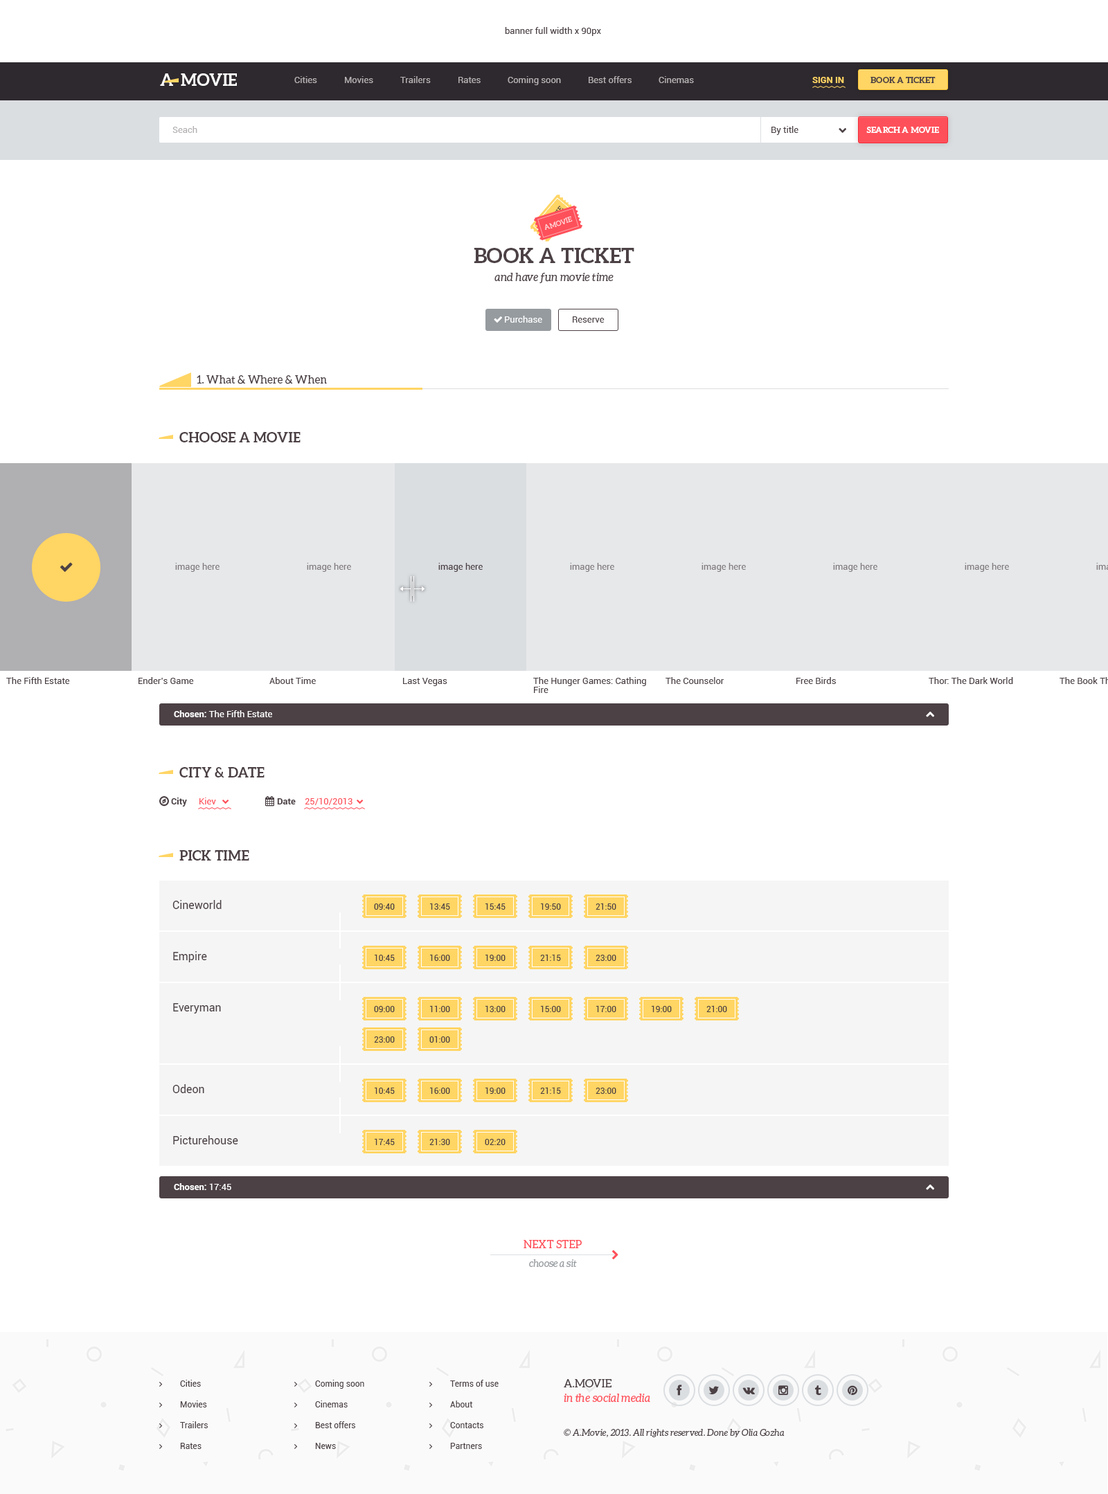
<style>
.page{position:relative;width:1108px;height:1494px;background:#ffffff}
.page>*{position:absolute;margin:0}
.t1{font:9px "Roboto-Regular";color:#4c4145}
.t2{font:16.6px "Aleo-Bold";color:#ffffff;text-transform:uppercase}
.t3{font:9px "Roboto-Regular";color:#b4b1b2}
.t4{font:9px "Roboto-Bold";color:#ffd564;text-transform:uppercase}
.t5{font:8.3px "Aleo-Bold";color:#4c4145;text-transform:uppercase}
.t6{font:8.3px "Aleo-Bold";color:#ffffff;text-transform:uppercase}
.t7{font:6.9px "Aleo-Regular";color:#fe505a;text-transform:uppercase}
.t8{font:6.9px "Aleo-Regular";color:#ffd5d7;text-transform:uppercase}
.t9{font:11.1px/18px "Aleo-Italic";color:#4c4145}
.t10{font:20.8px/18px "Aleo-Bold";color:#4c4145;text-transform:uppercase}
.t11{font:9px "Roboto-Regular";color:#ffffff}
.t12{font:11.1px "Aleo-Regular";color:#4c4145}
.t13{font:13.8px "Aleo-Bold";color:#4c4145;text-transform:uppercase}
.t14{font:9px "Roboto-Regular";color:#827a7d}
.t15{font:9px/9px "Roboto-Regular";color:#4c4145}
.t16{font:9px "Roboto-Bold";color:#ffffff}
.t17{font:9px "Roboto-Bold";color:#4c4145}
.t18{font:9px "Roboto-Regular";color:#fe505a}
.t19{font:11.1px "Roboto-Regular";color:#4c4145}
.t20{font:8.3px "Roboto-Regular";color:#4c4145}
.t21{font:11.1px "Aleo-Regular";color:#fe505a;text-transform:uppercase}
.t22{font:9.7px "Aleo-Italic";color:#969b9f}
.t23{font:11.1px/14.5px "Aleo-Italic";color:#fe505a}
.t24{font:11.1px/14.5px "Aleo-Regular";color:#4c4145;text-transform:uppercase}
.t25{font:9px "Aleo-Italic";color:#4c4145}
</style>
<div class="page">
<p class="t1" style="left:505px;top:27px;width:96px;height:9px">banner full width x 90px</p>
<p class="t2" style="left:160px;top:73px;width:13px;height:13px">A</p>
<p class="t2" style="left:181px;top:73px;width:56px;height:13px">movie</p>
<p class="t3" style="left:294px;top:76px;width:23px;height:7px">Cities</p>
<p class="t3" style="left:345px;top:76px;width:28px;height:7px">Movies</p>
<p class="t3" style="left:400px;top:76px;width:31px;height:7px">Trailers</p>
<p class="t3" style="left:458px;top:77px;width:22px;height:6px">Rates</p>
<p class="t3" style="left:507px;top:76px;width:54px;height:9px">Coming soon</p>
<p class="t3" style="left:588px;top:76px;width:43px;height:7px">Best offers</p>
<p class="t3" style="left:658px;top:76px;width:36px;height:7px">Cinemas</p>
<p class="t4" style="left:812px;top:77px;width:32px;height:6px">Sign in</p>
<p class="t5" style="left:870px;top:77px;width:65px;height:6px">Book a ticket</p>
<p class="t3" style="left:172px;top:126px;width:25px;height:7px">Seach</p>
<p class="t1" style="left:771px;top:126px;width:27px;height:9px">By title</p>
<p class="t6" style="left:866px;top:127px;width:73px;height:6px">search a movie</p>
<p class="t7" style="left:542px;top:206px;width:22px;height:25px;rotate:-50deg">amovie</p>
<p class="t8" style="left:545px;top:216px;width:28px;height:14px;rotate:-17deg">amovie</p>
<p class="t9" style="left:474px;top:248px;width:160px;height:35px;text-align:center"><span class="t10">Book a ticket<br></span>and have fun movie time</p>
<p class="t11" style="left:505px;top:316px;width:37px;height:7px">Purchase</p>
<p class="t1" style="left:573px;top:316px;width:31px;height:7px">Reserve</p>
<p class="t12" style="left:197px;top:375px;width:130px;height:9px">1. What &amp; Where &amp; When</p>
<p class="t13" style="left:179px;top:432px;width:121px;height:10px">Choose a movie</p>
<p class="t14" style="left:175px;top:563px;width:44px;height:9px">image here</p>
<p class="t14" style="left:307px;top:563px;width:44px;height:9px">image here</p>
<p class="t1" style="left:438px;top:563px;width:45px;height:9px">image here</p>
<p class="t14" style="left:570px;top:563px;width:44px;height:9px">image here</p>
<p class="t14" style="left:701px;top:563px;width:45px;height:9px">image here</p>
<p class="t14" style="left:833px;top:563px;width:44px;height:9px">image here</p>
<p class="t14" style="left:964px;top:563px;width:45px;height:9px">image here</p>
<p class="t1" style="left:6px;top:677px;width:64px;height:7px">The Fifth Estate</p>
<p class="t1" style="left:138px;top:677px;width:56px;height:7px">Ender’s Game</p>
<p class="t1" style="left:269px;top:677px;width:47px;height:7px">About Time</p>
<p class="t1" style="left:403px;top:678px;width:44px;height:8px">Last Vegas</p>
<p class="t15" style="left:533px;top:677px;width:113px;height:16px">The Hunger Games: Cathing <br>Fire</p>
<p class="t1" style="left:665px;top:677px;width:59px;height:7px">The Counselor</p>
<p class="t1" style="left:796px;top:677px;width:40px;height:7px">Free Birds</p>
<p class="t1" style="left:928px;top:677px;width:85px;height:7px">Thor: The Dark World</p>
<p class="t11" style="left:174px;top:710px;width:98px;height:7px"><span class="t16">Chosen: </span>The Fifth Estate</p>
<p class="t13" style="left:179px;top:767px;width:85px;height:10px">City &amp; Date</p>
<p class="t17" style="left:171px;top:798px;width:16px;height:9px">City</p>
<p class="t18" style="left:199px;top:798px;width:17px;height:6px">Kiev</p>
<p class="t18" style="left:305px;top:798px;width:47px;height:7px">25/10/2013</p>
<p class="t17" style="left:277px;top:798px;width:19px;height:6px">Date</p>
<p class="t13" style="left:179px;top:850px;width:70px;height:11px">Pick time</p>
<p class="t19" style="left:172px;top:900px;width:50px;height:9px">Cineworld</p>
<p class="t20" style="left:374px;top:903px;width:21px;height:7px">09:40</p>
<p class="t20" style="left:430px;top:903px;width:20px;height:7px">13:45</p>
<p class="t20" style="left:485px;top:903px;width:20px;height:7px">15:45</p>
<p class="t20" style="left:541px;top:903px;width:20px;height:7px">19:50</p>
<p class="t20" style="left:595px;top:903px;width:21px;height:7px">21:50</p>
<p class="t19" style="left:173px;top:951px;width:34px;height:11px">Empire</p>
<p class="t20" style="left:375px;top:954px;width:20px;height:7px">10:45</p>
<p class="t20" style="left:430px;top:954px;width:20px;height:7px">16:00</p>
<p class="t20" style="left:485px;top:954px;width:20px;height:7px">19:00</p>
<p class="t20" style="left:540px;top:954px;width:21px;height:7px">21:15</p>
<p class="t20" style="left:595px;top:955px;width:21px;height:6px">23:00</p>
<p class="t19" style="left:173px;top:1003px;width:48px;height:11px">Everyman</p>
<p class="t20" style="left:374px;top:1006px;width:21px;height:6px">09:00</p>
<p class="t20" style="left:430px;top:1005px;width:20px;height:7px">11:00</p>
<p class="t20" style="left:485px;top:1005px;width:20px;height:7px">13:00</p>
<p class="t20" style="left:541px;top:1005px;width:20px;height:7px">15:00</p>
<p class="t20" style="left:596px;top:1005px;width:20px;height:7px">17:00</p>
<p class="t20" style="left:651px;top:1005px;width:21px;height:7px">19:00</p>
<p class="t20" style="left:706px;top:1005px;width:21px;height:7px">21:00</p>
<p class="t20" style="left:374px;top:1036px;width:21px;height:7px">23:00</p>
<p class="t20" style="left:429px;top:1036px;width:21px;height:7px">01:00</p>
<p class="t19" style="left:172px;top:1084px;width:32px;height:9px">Odeon</p>
<p class="t20" style="left:375px;top:1087px;width:20px;height:7px">10:45</p>
<p class="t20" style="left:430px;top:1087px;width:20px;height:7px">16:00</p>
<p class="t20" style="left:485px;top:1087px;width:20px;height:7px">19:00</p>
<p class="t20" style="left:540px;top:1087px;width:21px;height:7px">21:15</p>
<p class="t20" style="left:595px;top:1088px;width:21px;height:6px">23:00</p>
<p class="t19" style="left:173px;top:1135px;width:65px;height:9px">Picturehouse</p>
<p class="t20" style="left:375px;top:1138px;width:20px;height:7px">17:45</p>
<p class="t20" style="left:429px;top:1138px;width:21px;height:7px">21:30</p>
<p class="t20" style="left:485px;top:1139px;width:20px;height:6px">02:20</p>
<p class="t16" style="left:174px;top:1183px;width:57px;height:7px">Chosen: <span class="t11">17:45</span></p>
<p class="t21" style="left:523px;top:1240px;width:59px;height:8px">next step</p>
<p class="t22" style="left:529px;top:1259px;width:48px;height:9px">choose a sit</p>
<p class="t20" style="left:180px;top:1380px;width:21px;height:7px">Cities</p>
<p class="t20" style="left:315px;top:1380px;width:49px;height:9px">Coming soon</p>
<p class="t20" style="left:450px;top:1380px;width:48px;height:7px">Terms of use</p>
<p class="t23" style="left:564px;top:1379px;width:86px;height:24px"><span class="t24">A.Movie <br></span>in the social media</p>
<p class="t20" style="left:180px;top:1401px;width:27px;height:6px">Movies</p>
<p class="t20" style="left:315px;top:1401px;width:33px;height:6px">Cinemas</p>
<p class="t20" style="left:450px;top:1401px;width:23px;height:6px">About</p>
<p class="t20" style="left:180px;top:1421px;width:28px;height:7px">Trailers</p>
<p class="t20" style="left:315px;top:1421px;width:40px;height:7px">Best offers</p>
<p class="t20" style="left:450px;top:1422px;width:33px;height:6px">Contacts</p>
<p class="t25" style="left:564px;top:1429px;width:220px;height:8px">© A.Movie, 2013. All rights reserved. Done by Olia Gozha</p>
<p class="t20" style="left:180px;top:1443px;width:21px;height:6px">Rates</p>
<p class="t20" style="left:315px;top:1443px;width:21px;height:6px">News</p>
<p class="t20" style="left:450px;top:1443px;width:32px;height:6px">Partners</p>
</div>
